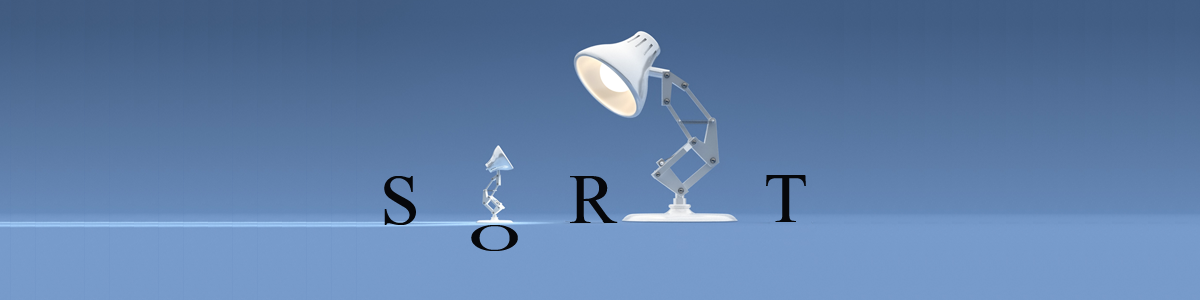
<style>
.page{position:relative;width:1200px;height:300px}
.page>*{position:absolute;margin:0}
.t1{font:108px "AngsanaNew";color:#06070a}
.t2{font:53.9px "AngsanaNew";color:#06070a;scale:2.01 1}
</style>
<div class="page">
<p class="t1" style="left:384px;top:176px;width:32px;height:49px">S</p>
<p class="t1" style="left:570px;top:176px;width:48px;height:47px">R</p>
<p class="t1" style="left:766px;top:175px;width:40px;height:47px">T</p>
<p class="t2" style="left:471px;top:225px;width:47px;height:26px">O</p>
</div>
